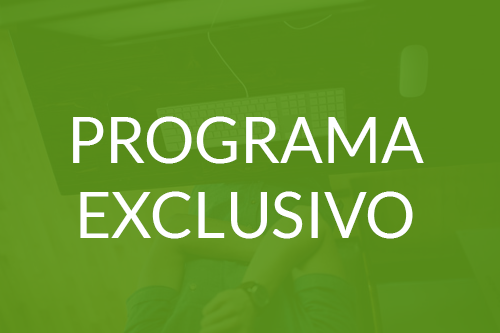
<style>
.page{position:relative;width:500px;height:333px}
.page>*{position:absolute;margin:0}
.t1{font:62.7px "Lato-Regular";color:#ffffff}
</style>
<div class="page">
<p class="t1" style="left:73px;top:116px;width:351px;height:123px;text-align:center">PROGRAMA<br>EXCLUSIVO</p>
</div>
